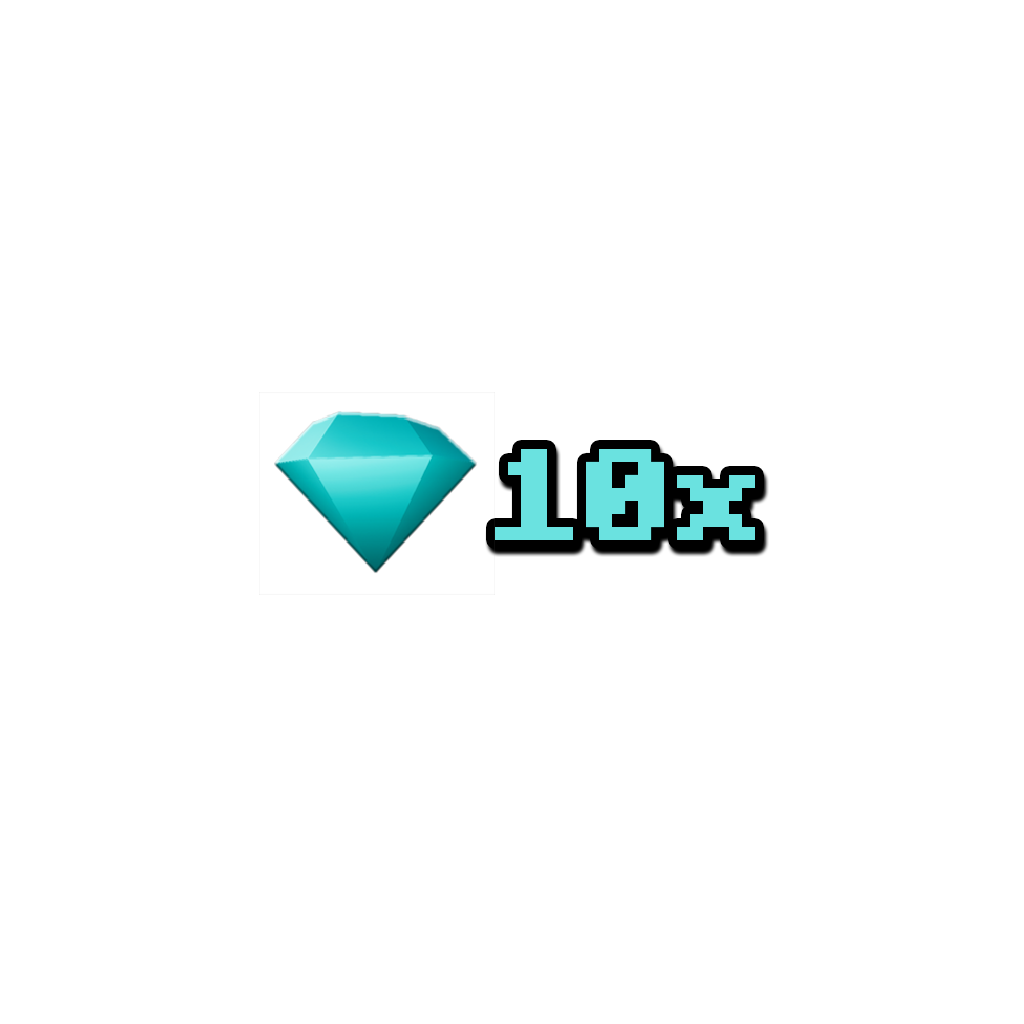
<style>
.page{position:relative;width:1024px;height:1024px;background:#ffffff}
.page>*{position:absolute;margin:0}
.t1{font:130px "Minecraft-Bold";color:#6ae2e0}
</style>
<div class="page">
<p class="t1" style="left:495px;top:449px;width:260px;height:91px">10x</p>
</div>
